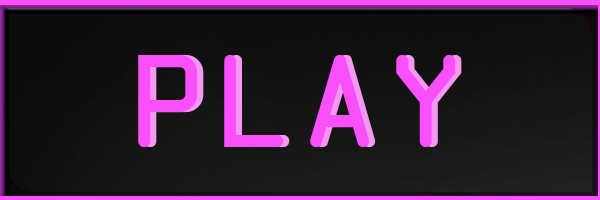
<style>
.page{position:relative;width:600px;height:200px}
.page>*{position:absolute;margin:0}
.t1{font:142px "OCRAExtended";color:#f950fb}
.t2{font:142px "OCRAExtended"}
</style>
<div class="page">
<p class="t1" style="left:138px;top:55px;width:318px;height:92px">PLAY</p>
<p class="t2" style="left:144px;top:55px;width:318px;height:92px">PLAY</p>
</div>
